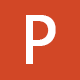
<style>
.page{position:relative;width:80px;height:80px;background:#d24726}
.page>*{position:absolute;margin:0}
.t1{font:116.7px "SegoeUI";color:#ffffff;font-weight:bold;scale:0.96 1}
</style>
<div class="page">
<p class="t1" style="left:26px;top:15px;width:30px;height:49px">P</p>
</div>
